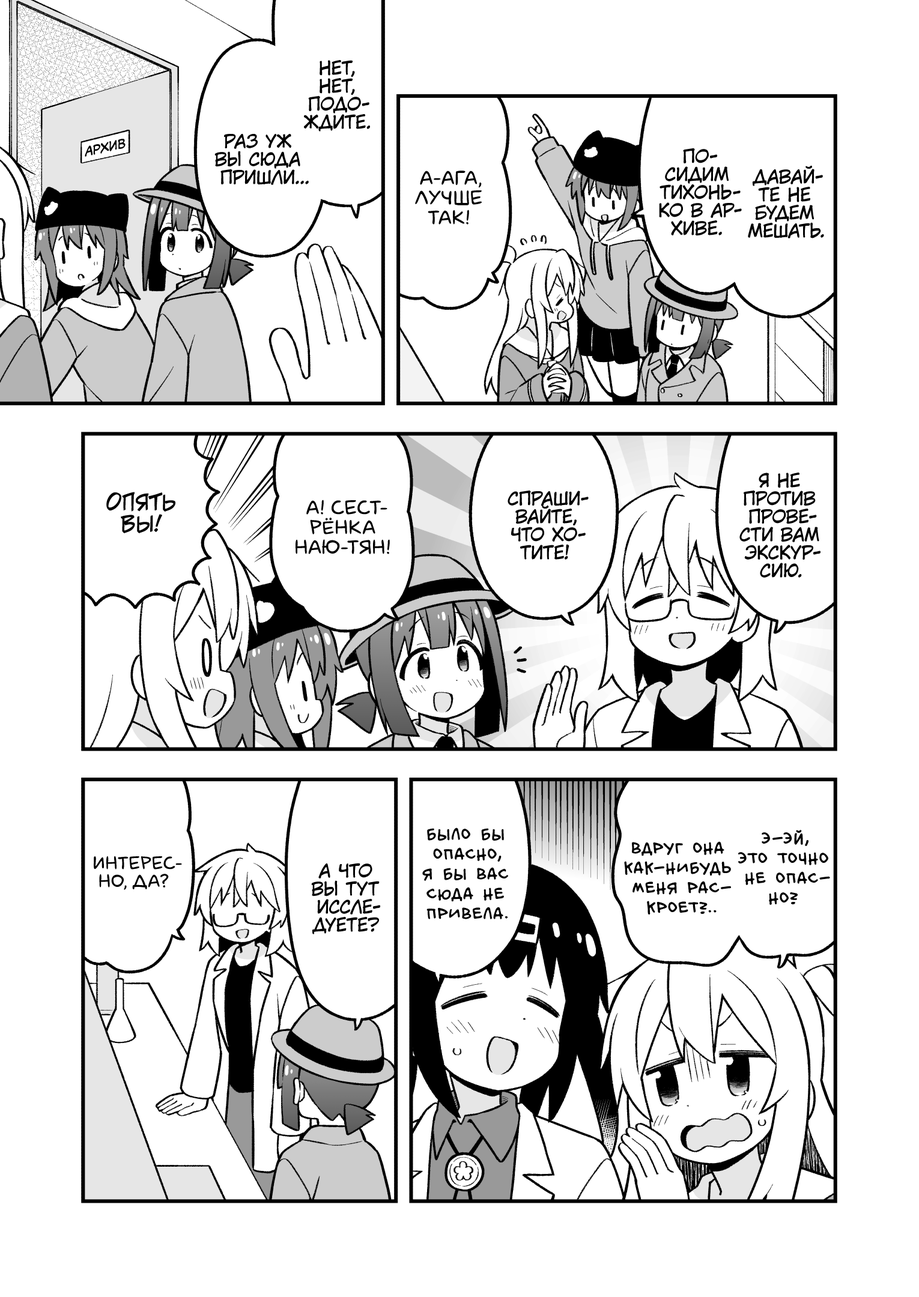
<style>
.page{position:relative;width:919px;height:1297px;background:#ffffff}
.page>*{position:absolute;margin:0}
.t1{font:18px "KuraiVoice2";color:#000000;text-transform:uppercase}
.t2{font:12.6px "v_CCMonologous";color:#000000;text-transform:uppercase}
.t3{font:19.8px "laCartoonerie";color:#000000;text-transform:uppercase}
.t4{font:21.6px "v_CCJeffCampbell";color:#000000;text-transform:uppercase}
.t5{font:19.8px "v_BillyTheFlyingRobotBBLC";color:#000000;text-transform:uppercase}
.t6{font:18px "laCartoonerie";color:#000000;text-transform:uppercase}
</style>
<div class="page">
<p class="t1" style="left:304px;top:60px;width:66px;height:72px;text-align:center">Нет,<br>нет,<br>подо-<br>ждите.</p>
<p class="t1" style="left:214px;top:133px;width:95px;height:52px;text-align:center">Раз уж<br>вы сюда<br>пришли...</p>
<p class="t2" style="left:85px;top:139px;width:41px;height:18px;rotate:-12deg">Архив</p>
<p class="t1" style="left:659px;top:148px;width:83px;height:88px;text-align:center">По-<br>сидим<br>тихонь-<br>ко в ар-<br>хиве.</p>
<p class="t3" style="left:415px;top:171px;width:67px;height:54px;text-align:center">А-ага,<br>лучше<br>так!</p>
<p class="t1" style="left:748px;top:165px;width:76px;height:73px;text-align:center">Давай-<br>те не<br>будем<br>мешать.</p>
<p class="t1" style="left:739px;top:473px;width:82px;height:105px;text-align:center">Я не<br>против<br>прове-<br>сти вам<br>экскур-<br>сию.</p>
<p class="t4" style="left:106px;top:492px;width:69px;height:41px;text-align:center">Опять<br>вы!</p>
<p class="t1" style="left:508px;top:490px;width:81px;height:70px;text-align:center">Спраши-<br>вайте,<br>что хо-<br>тите!</p>
<p class="t3" style="left:296px;top:500px;width:94px;height:54px;text-align:center">А! Сест-<br>рёнка<br>Наю-тян!</p>
<p class="t5" style="left:422px;top:828px;width:86px;height:92px;text-align:center">Было бы<br>опасно,<br>я бы вас<br>сюда не<br>привела.</p>
<p class="t5" style="left:738px;top:830px;width:92px;height:75px;text-align:center">Э-эй,<br>это точно<br>не опас-<br>но?</p>
<p class="t5" style="left:624px;top:842px;width:107px;height:73px;text-align:center">Вдруг она<br>как-нибудь<br>меня рас-<br>кроет?..</p>
<p class="t6" style="left:94px;top:856px;width:88px;height:34px;text-align:center">Интерес-<br>но, да?</p>
<p class="t1" style="left:311px;top:863px;width:69px;height:72px;text-align:center">А что<br>вы тут<br>иссле-<br>дуете?</p>
</div>
